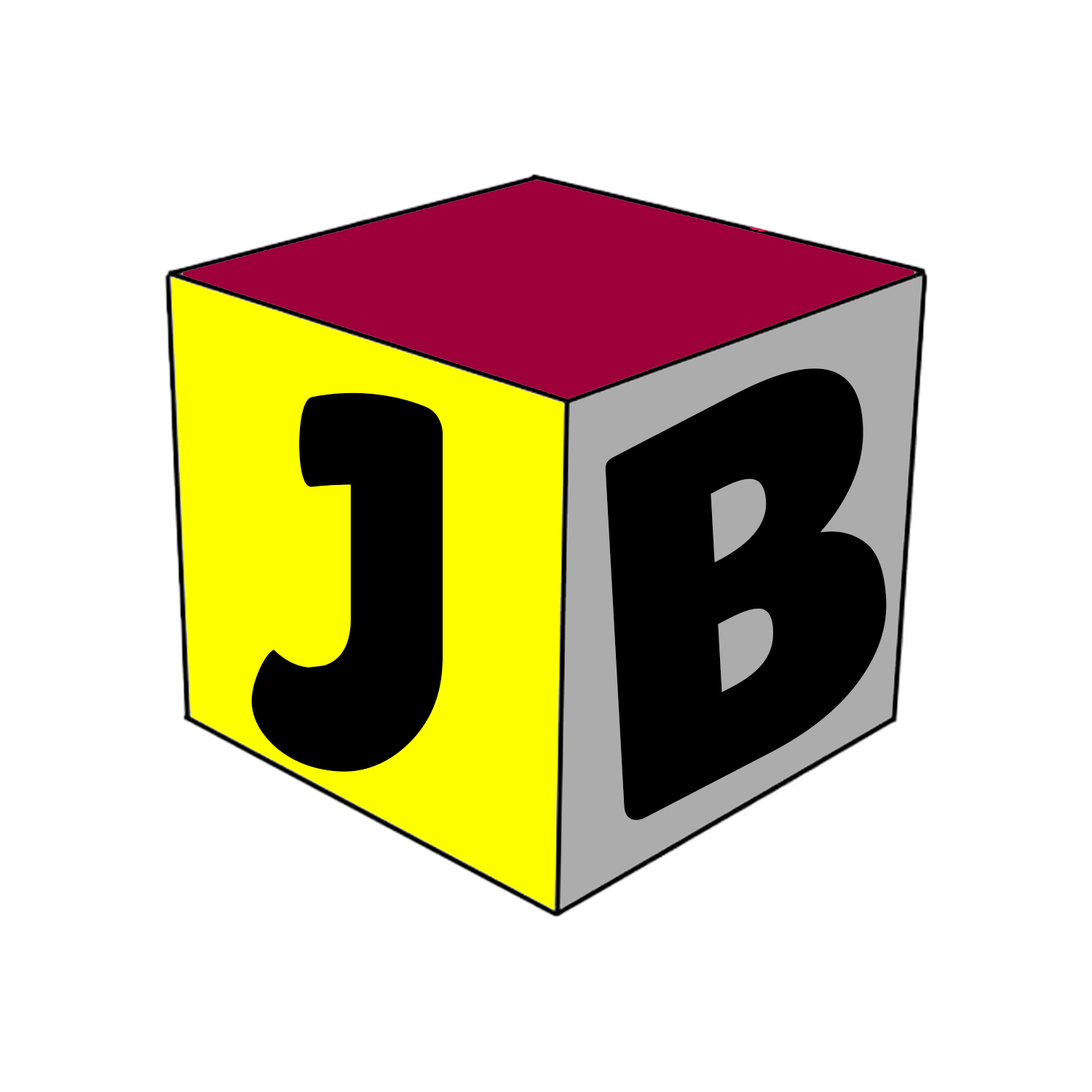
<style>
.page{position:relative;width:1092px;height:1092px;background:#ffffff}
.page>*{position:absolute;margin:0}
.t1{font:524.2px "LilitaOne";color:#000000;scale:1.13 1}
.t2{font:452.2px "LilitaOne";color:#000000}
</style>
<div class="page">
<p class="t1" style="left:605px;top:368px;width:282px;height:452px;rotate:-27deg">B</p>
<p class="t2" style="left:251px;top:392px;width:192px;height:380px">J</p>
</div>
